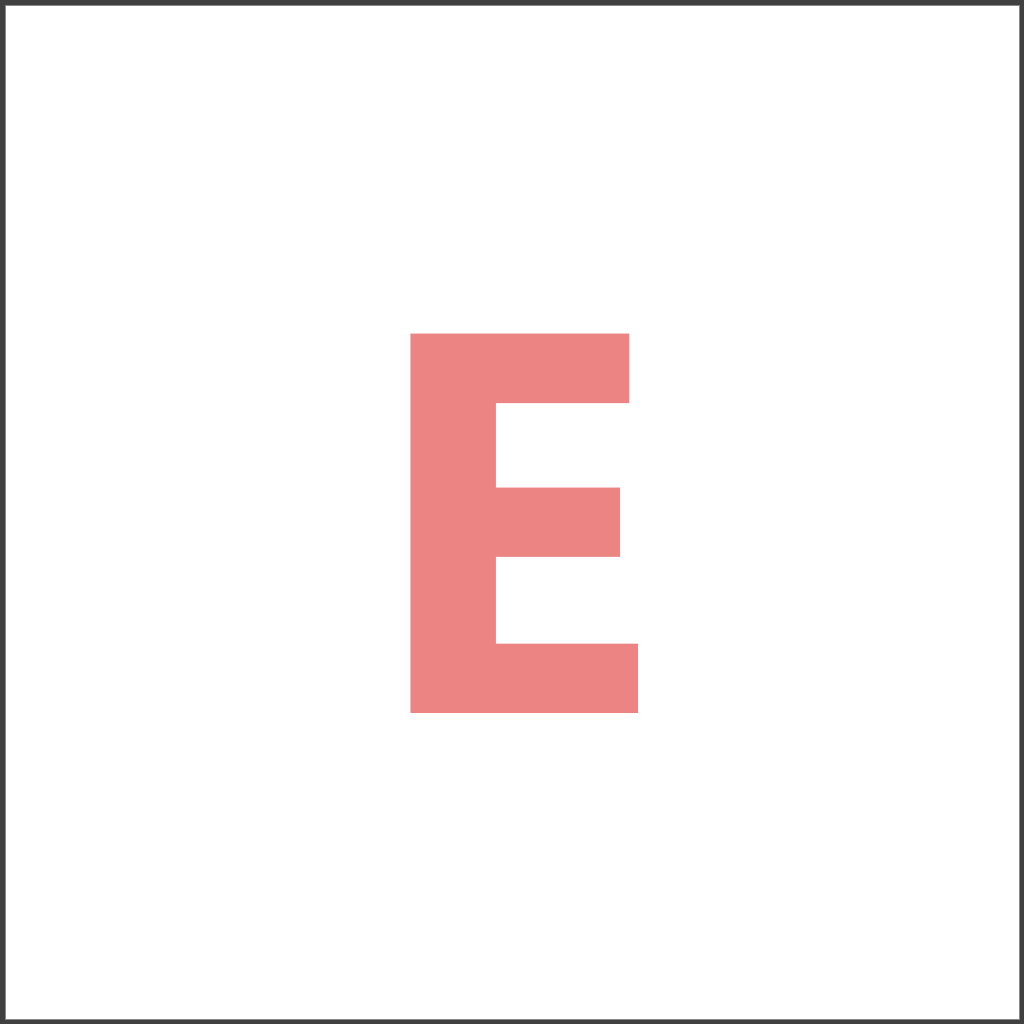
<style>
.page{position:relative;width:1024px;height:1024px;background:#ffffff}
.page>*{position:absolute;margin:0}
.t1{font:541.7px "SegoeWP-Bold";color:#ec8484}
</style>
<div class="page">
<p class="t1" style="left:410px;top:333px;width:228px;height:380px">E</p>
</div>
